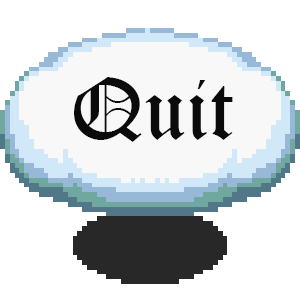
<style>
.page{position:relative;width:300px;height:300px;background:#ffffff}
.page>*{position:absolute;margin:0}
.t1{font:85px "OldEnglishTextMT";color:#0b0b0b}
</style>
<div class="page">
<p class="t1" style="left:74px;top:77px;width:159px;height:65px">Quit</p>
</div>
